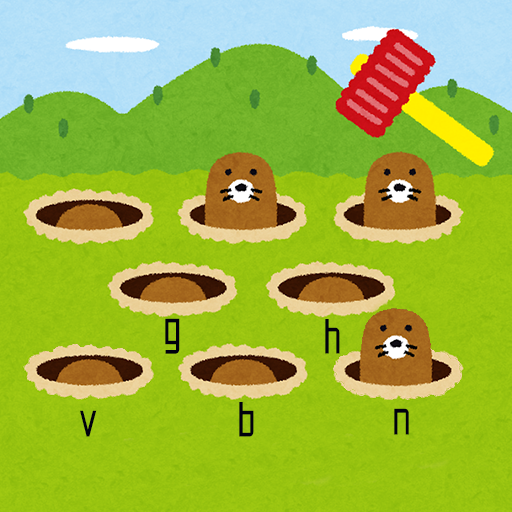
<style>
.page{position:relative;width:512px;height:512px}
.page>*{position:absolute;margin:0}
.t1{font:52.1px "Makinas-Flat-5";color:#00000e;scale:0.8 1}
</style>
<div class="page">
<p class="t1" style="left:165px;top:318px;width:15px;height:36px">g</p>
<p class="t1" style="left:325px;top:319px;width:15px;height:35px">h</p>
<p class="t1" style="left:80px;top:410px;width:17px;height:27px">v</p>
<p class="t1" style="left:239px;top:402px;width:15px;height:35px">b</p>
<p class="t1" style="left:394px;top:408px;width:15px;height:27px">n</p>
</div>
